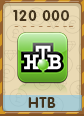
<style>
.page{position:relative;width:84px;height:116px;background:#eadab4}
.page>*{position:absolute;margin:0}
.t1{font:15px "RotondaC-Bold";letter-spacing:0.04em;color:#43341d;text-transform:uppercase}
</style>
<div class="page">
<p class="t1" style="left:13px;top:10px;width:56px;height:11px">120 000</p>
<p class="t1" style="left:28px;top:97px;width:28px;height:11px">НТВ</p>
</div>
